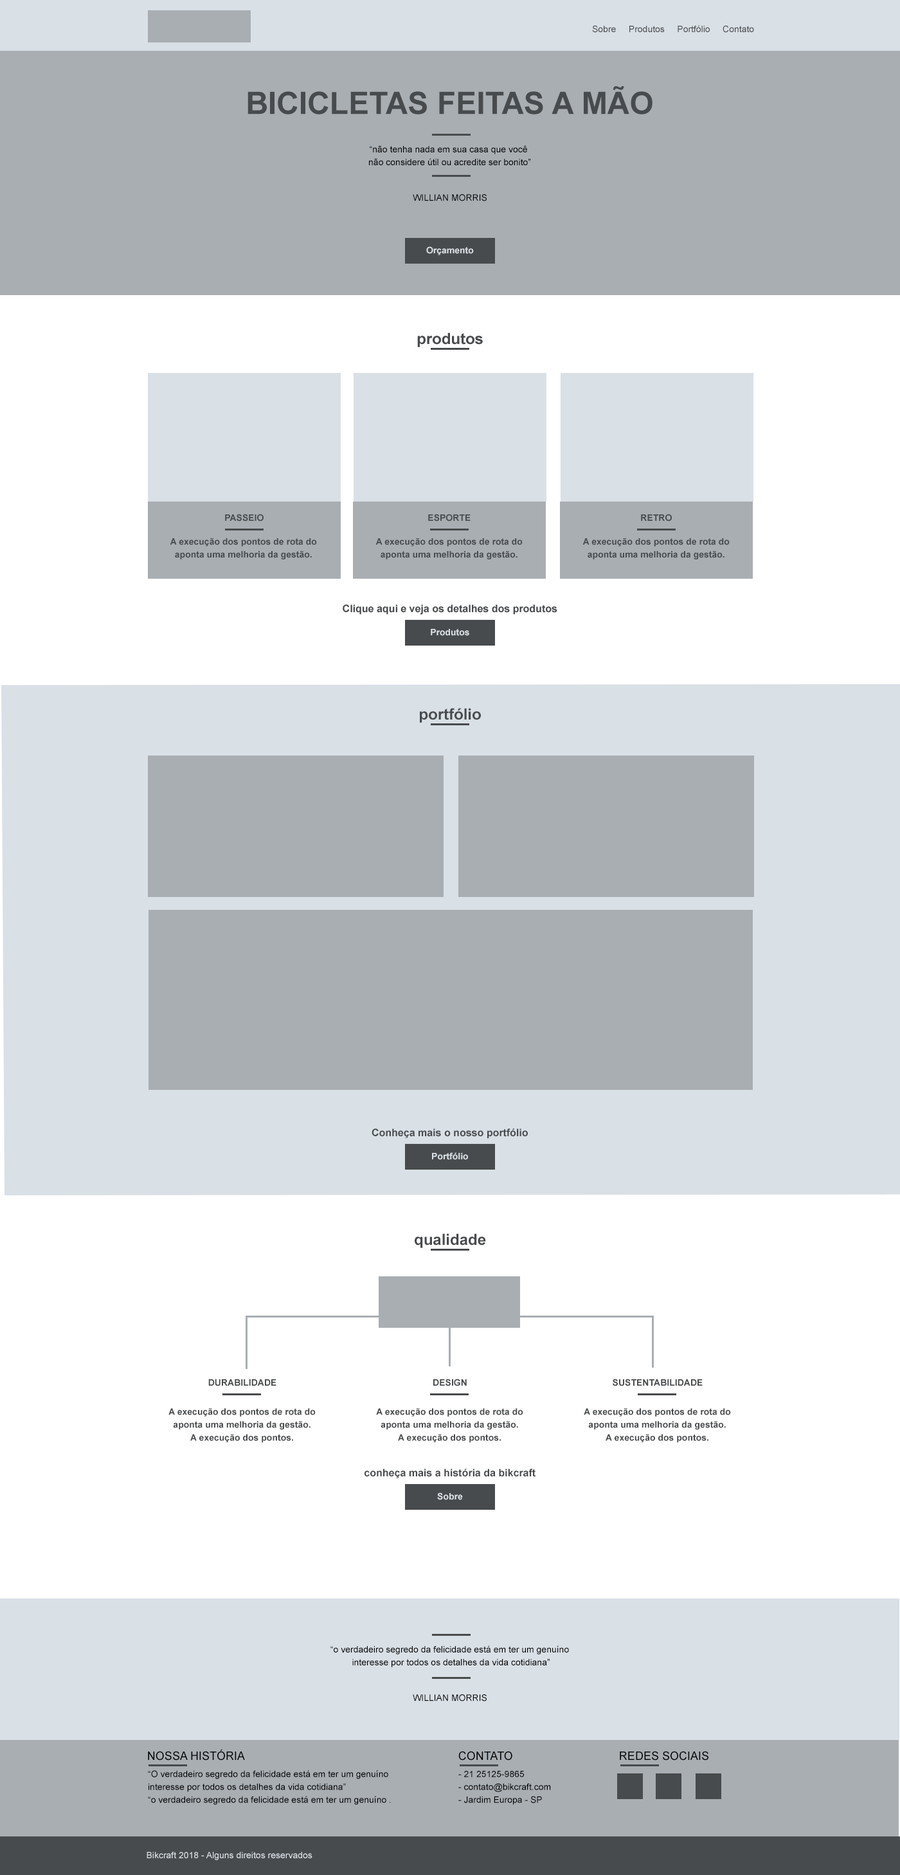
<style>
.page{position:relative;width:900px;height:1875px;background:#ffffff}
.page>*{position:absolute;margin:0}
.t1{font:9px "ArialMT";color:#484b4d}
.t2{font:30.9px "Arial-BoldMT";color:#484b4d;text-transform:uppercase}
.t3{font:9px/12.9px "ArialMT";color:#000000}
.t4{font:9px "ArialMT";color:#000000;text-transform:uppercase}
.t5{font:9px "Arial-BoldMT";color:#d9e0e6}
.t6{font:15.4px "Arial-BoldMT";color:#484b4d}
.t7{font:9px "Arial-BoldMT";color:#484b4d;text-transform:uppercase}
.t8{font:9px/12.9px "Arial-BoldMT";color:#484b4d}
.t9{font:10.3px "Arial-BoldMT";color:#484b4d}
.t10{font:11.6px "ArialMT";color:#000000;text-transform:uppercase}
.t11{font:9px "ArialMT";color:#d9e0e6}
</style>
<div class="page">
<p class="t1" style="left:592px;top:25px;width:162px;height:8px">Sobre     Produtos     Portfólio     Contato</p>
<p class="t2" style="left:248px;top:86px;width:404px;height:28px">Bicicletas Feitas a Mão</p>
<p class="t3" style="left:369px;top:145px;width:162px;height:20px;text-align:center">“não tenha nada em sua casa que você <br>não considere útil ou acredite ser bonito”</p>
<p class="t4" style="left:413px;top:194px;width:74px;height:7px">willian morris</p>
<p class="t5" style="left:426px;top:246px;width:48px;height:9px">Orçamento</p>
<p class="t6" style="left:417px;top:332px;width:66px;height:15px">produtos</p>
<p class="t7" style="left:225px;top:514px;width:39px;height:7px">passeio</p>
<p class="t7" style="left:428px;top:514px;width:43px;height:7px">Esporte</p>
<p class="t7" style="left:641px;top:514px;width:31px;height:7px">retro</p>
<p class="t8" style="left:170px;top:538px;width:147px;height:21px;text-align:center">A execução dos pontos de rota do aponta uma melhoria da gestão.</p>
<p class="t8" style="left:375px;top:538px;width:148px;height:21px;text-align:center">A execução dos pontos de rota do aponta uma melhoria da gestão.</p>
<p class="t8" style="left:582px;top:538px;width:148px;height:21px;text-align:center">A execução dos pontos de rota do aponta uma melhoria da gestão.</p>
<p class="t9" style="left:343px;top:604px;width:214px;height:11px">Clique aqui e veja os detalhes dos produtos</p>
<p class="t5" style="left:431px;top:629px;width:38px;height:7px">Produtos</p>
<p class="t6" style="left:420px;top:708px;width:61px;height:15px">portfólio</p>
<p class="t9" style="left:372px;top:1128px;width:156px;height:10px">Conheça mais o nosso portfólio</p>
<p class="t5" style="left:432px;top:1152px;width:36px;height:8px">Portfólio</p>
<p class="t6" style="left:415px;top:1233px;width:71px;height:15px">qualidade</p>
<p class="t7" style="left:208px;top:1379px;width:68px;height:7px">durabilidade</p>
<p class="t7" style="left:433px;top:1378px;width:34px;height:8px">design</p>
<p class="t7" style="left:613px;top:1378px;width:90px;height:8px">sustentabilidade</p>
<p class="t8" style="left:168px;top:1408px;width:148px;height:35px;text-align:center">A execução dos pontos de rota do aponta uma melhoria da gestão.<br>A execução dos pontos.</p>
<p class="t8" style="left:376px;top:1408px;width:147px;height:35px;text-align:center">A execução dos pontos de rota do aponta uma melhoria da gestão.<br>A execução dos pontos.</p>
<p class="t8" style="left:584px;top:1408px;width:147px;height:35px;text-align:center">A execução dos pontos de rota do aponta uma melhoria da gestão.<br>A execução dos pontos.</p>
<p class="t9" style="left:364px;top:1468px;width:172px;height:10px">conheça mais a história da bikcraft</p>
<p class="t5" style="left:437px;top:1492px;width:26px;height:8px">Sobre</p>
<p class="t3" style="left:330px;top:1645px;width:239px;height:22px;text-align:center">“o verdadeiro segredo da felicidade está em ter um genuíno<br> interesse por todos os detalhes da vida cotidiana”</p>
<p class="t4" style="left:413px;top:1694px;width:74px;height:7px">willian morris</p>
<p class="t10" style="left:148px;top:1749px;width:97px;height:11px">Nossa História</p>
<p class="t10" style="left:458px;top:1751px;width:54px;height:9px">contato</p>
<p class="t10" style="left:620px;top:1751px;width:88px;height:9px">redes sociais</p>
<p class="t3" style="left:148px;top:1770px;width:243px;height:35px">“O verdadeiro segredo da felicidade está em ter um genuíno interesse por todos os detalhes da vida cotidiana”<br>“o verdadeiro segredo da felicidade está em ter um genuíno .</p>
<p class="t3" style="left:458px;top:1770px;width:93px;height:35px">- 21 25125-9865<br>- contato@bikcraft.com<br>- Jardim Europa - SP</p>
<p class="t11" style="left:147px;top:1851px;width:165px;height:9px">Bikcraft 2018 - Alguns direitos reservados</p>
</div>
